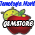
<style>
.page{position:relative;width:35px;height:35px;background:#ffffff}
.page>*{position:absolute;margin:0}
.t1{font:7.7px "ForteMT";color:#152aec;scale:0.59 1}
.t2{font:8.4px "ForteMT";color:#ffffff;scale:0.7 1}
</style>
<div class="page">
<p class="t1" style="left:0px;top:1px;width:36px;height:6px">Tecnologia Movil</p>
<p class="t2" style="left:3px;top:21px;width:30px;height:6px">GSMSTORE</p>
</div>
